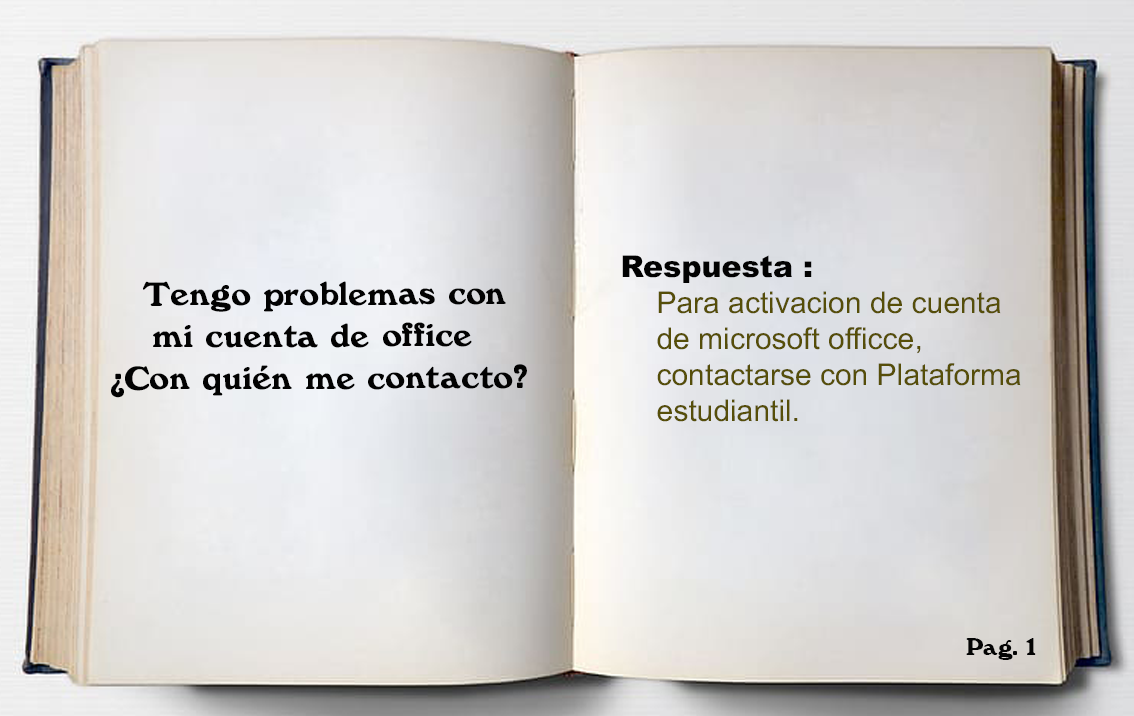
<style>
.page{position:relative;width:1134px;height:716px}
.page>*{position:absolute;margin:0}
.t1{font:30px "ArialMT";color:#564e09}
.t2{font:30px "Arial-Black";color:#020202}
.t3{font:35px "Windsor-Regular";color:#020202}
.t4{font:25px "Windsor-Regular";color:#040404}
</style>
<div class="page">
<p class="t1" style="left:622px;top:255px;width:399px;height:167px"><span class="t2">Respuesta : <br>  </span>Para activacion de cuenta<br> de microsoft officce, <br> contactarse con Plataforma<br>  estudiantil.</p>
<p class="t3" style="left:111px;top:281px;width:416px;height:117px;text-align:center">Tengo problemas con <br>mi cuenta de office <br>¿Con quién me contacto?</p>
<p class="t4" style="left:966px;top:638px;width:70px;height:22px">Pag. 1</p>
</div>
